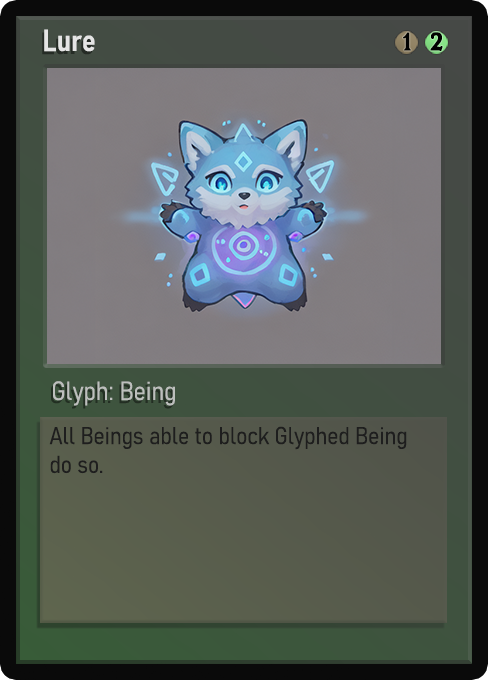
<style>
.page{position:relative;width:488px;height:680px}
.page>*{position:absolute;margin:0}
.t1{font:30px "Bahnschrift-SemiBoldSemiCondensed";color:#f2f2f2;font-weight:bold}
.t2{font:25px "WTRRoycroft";color:#000000;font-weight:bold;scale:1.09 1}
.t3{font:26px "Bahnschrift-LightSemiCondensed";color:#c8c8c8;font-weight:bold}
.t4{font:24px "Bahnschrift-LightSemiCondensed";color:#1e1e1e;font-weight:bold}
</style>
<div class="page">
<p class="t1" style="left:44px;top:29px;width:51px;height:23px;opacity:0.9">Lure</p>
<p class="t2" style="left:403px;top:32px;width:8px;height:19px">1</p>
<p class="t2" style="left:430px;top:32px;width:13px;height:19px">2</p>
<p class="t3" style="left:53px;top:381px;width:122px;height:25px;opacity:0.9">Glyph: Being</p>
<p class="t4" style="left:49px;top:426px;width:358px;height:48px">All Beings able to block Glyphed Being do so.</p>
</div>
